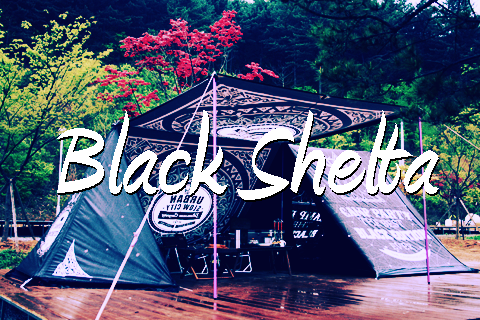
<style>
.page{position:relative;width:480px;height:320px}
.page>*{position:absolute;margin:0}
.t1{font:128px "Amienne-Bold";color:#ffffff}
</style>
<div class="page">
<p class="t1" style="left:57px;top:110px;width:382px;height:90px">Black Shelta</p>
</div>
